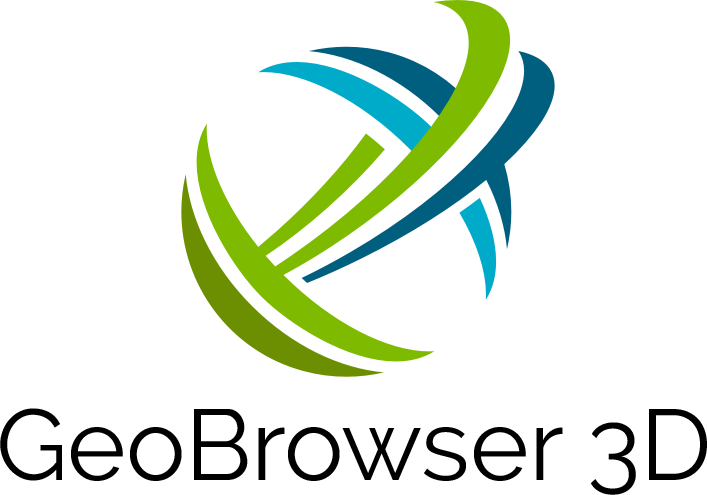
<style>
.page{position:relative;width:707px;height:495px;background:#ffffff}
.page>*{position:absolute;margin:0}
.t1{font:100px "Raleway-Regular";color:#000000}
</style>
<div class="page">
<p class="t1" style="left:0px;top:408px;width:707px;height:87px">GeoBrowser 3D</p>
</div>
